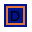
<style>
.page{position:relative;width:32px;height:32px;background:#ffffff}
.page>*{position:absolute;margin:0}
.t1{font:14.6px "MyriadPro-Regular";color:#000000}
</style>
<div class="page">
<p class="t1" style="left:11px;top:11px;width:9px;height:10px">D</p>
</div>
